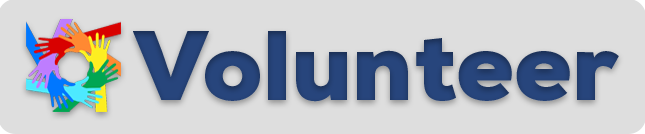
<style>
.page{position:relative;width:645px;height:134px;background:#dedede}
.page>*{position:absolute;margin:0}
.t1{font:98.5px "NexaBlack";color:#27457c}
</style>
<div class="page">
<p class="t1" style="left:133px;top:31px;width:486px;height:71px">Volunteer</p>
</div>
